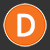
<style>
.page{position:relative;width:50px;height:50px;background:#333333}
.page>*{position:absolute;margin:0}
.t1{font:30px "NanumGothicOTFBold";color:#ffffff}
</style>
<div class="page">
<p class="t1" style="left:17px;top:13px;width:18px;height:24px">D</p>
</div>
